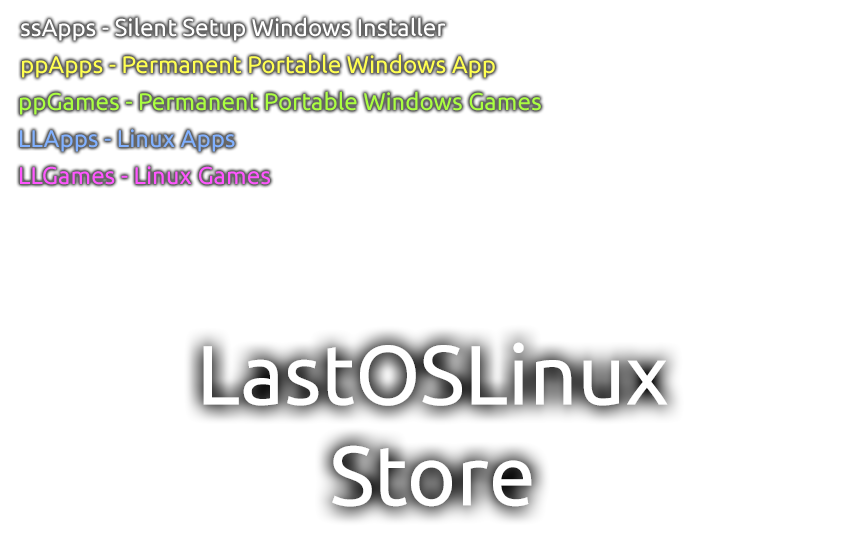
<style>
.page{position:relative;width:863px;height:539px;background:#ffffff}
.page>*{position:absolute;margin:0}
.t1{font:24px "Ubuntu";color:#ffffff}
.t2{font:24px "Ubuntu";color:#ffff50}
.t3{font:24px "Ubuntu";color:#aaff40}
.t4{font:24px "Ubuntu";color:#80b0ff}
.t5{font:24px "Ubuntu";color:#ff55ff}
</style>
<div class="page">
<p class="t1" style="left:21px;top:17px;width:425px;height:24px">ssApps - Silent Setup Windows Installer</p>
<p class="t2" style="left:22px;top:54px;width:473px;height:24px">ppApps - Permanent Portable Windows App</p>
<p class="t3" style="left:20px;top:91px;width:521px;height:24px">ppGames - Permanent Portable Windows Games</p>
<p class="t4" style="left:20px;top:129px;width:215px;height:23px">LLApps - Linux Apps</p>
<p class="t5" style="left:20px;top:166px;width:250px;height:19px">LLGames - Linux Games</p>
</div>
